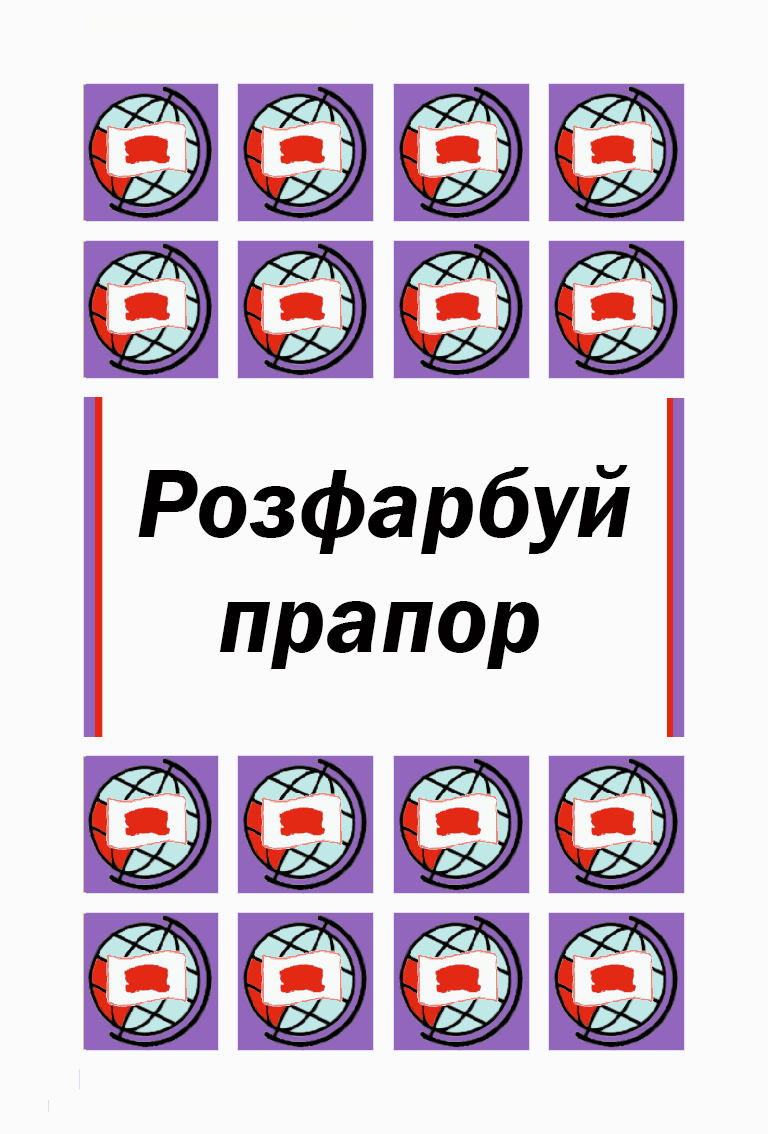
<style>
.page{position:relative;width:768px;height:1134px;background:#fbfbfb}
.page>*{position:absolute;margin:0}
.t1{font:100px "FranklinGothic-DemiItalic";color:#020000}
</style>
<div class="page">
<p class="t1" style="left:138px;top:465px;width:492px;height:89px">Розфарбуй</p>
<p class="t1" style="left:219px;top:601px;width:320px;height:68px">прапор</p>
</div>
